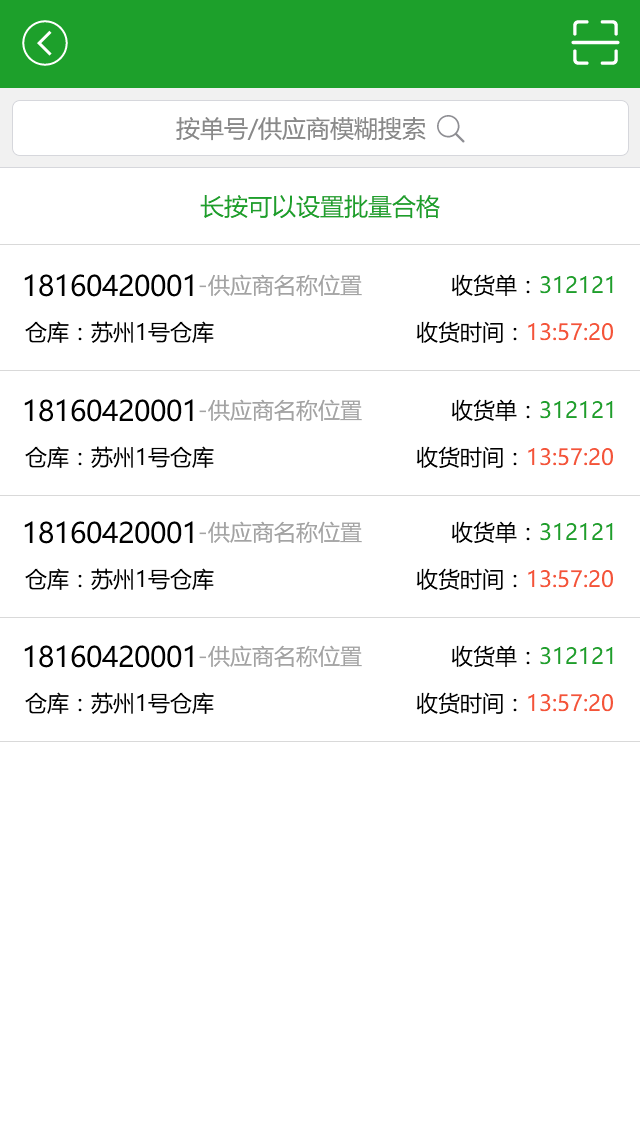
<style>
.page{position:relative;width:640px;height:1136px;background:#ffffff}
.page>*{position:absolute;margin:0}
.t1{font:24px "MicrosoftYaHei";color:#898989}
.t2{font:24px "MicrosoftYaHei";color:#1da02b}
.t3{font:28px "MicrosoftYaHei";color:#000000}
.t4{font:22px "MicrosoftYaHei";color:#a3a3a3}
.t5{font:22px "MicrosoftYaHei";color:#1da02b}
.t6{font:22px "MicrosoftYaHei";color:#000000}
.t7{font:22px "MicrosoftYaHei";color:#f45438}
</style>
<div class="page">
<p class="t1" style="left:176px;top:117px;width:250px;height:24px">按单号/供应商模糊搜索</p>
<p class="t2" style="left:200px;top:195px;width:240px;height:24px">长按可以设置批量合格</p>
<p class="t3" style="left:24px;top:274px;width:169px;height:23px">18160420001</p>
<p class="t4" style="left:199px;top:274px;width:163px;height:22px">-供应商名称位置</p>
<p class="t5" style="left:451px;top:274px;width:162px;height:22px"><span class="t6">收货单：</span>312121</p>
<p class="t6" style="left:25px;top:321px;width:189px;height:22px">仓库：苏州1号仓库</p>
<p class="t7" style="left:416px;top:321px;width:197px;height:22px"><span class="t6">收货时间：</span>13:57:20</p>
<p class="t3" style="left:24px;top:399px;width:169px;height:23px">18160420001</p>
<p class="t4" style="left:199px;top:399px;width:163px;height:22px">-供应商名称位置</p>
<p class="t5" style="left:451px;top:399px;width:162px;height:22px"><span class="t6">收货单：</span>312121</p>
<p class="t6" style="left:25px;top:446px;width:189px;height:22px">仓库：苏州1号仓库</p>
<p class="t7" style="left:416px;top:446px;width:197px;height:22px"><span class="t6">收货时间：</span>13:57:20</p>
<p class="t3" style="left:24px;top:521px;width:169px;height:23px">18160420001</p>
<p class="t4" style="left:199px;top:521px;width:163px;height:22px">-供应商名称位置</p>
<p class="t5" style="left:451px;top:521px;width:162px;height:22px"><span class="t6">收货单：</span>312121</p>
<p class="t6" style="left:25px;top:568px;width:189px;height:22px">仓库：苏州1号仓库</p>
<p class="t7" style="left:416px;top:568px;width:197px;height:22px"><span class="t6">收货时间：</span>13:57:20</p>
<p class="t3" style="left:24px;top:645px;width:169px;height:23px">18160420001</p>
<p class="t4" style="left:199px;top:645px;width:163px;height:22px">-供应商名称位置</p>
<p class="t5" style="left:451px;top:645px;width:162px;height:22px"><span class="t6">收货单：</span>312121</p>
<p class="t6" style="left:25px;top:692px;width:189px;height:22px">仓库：苏州1号仓库</p>
<p class="t7" style="left:416px;top:692px;width:197px;height:22px"><span class="t6">收货时间：</span>13:57:20</p>
</div>
